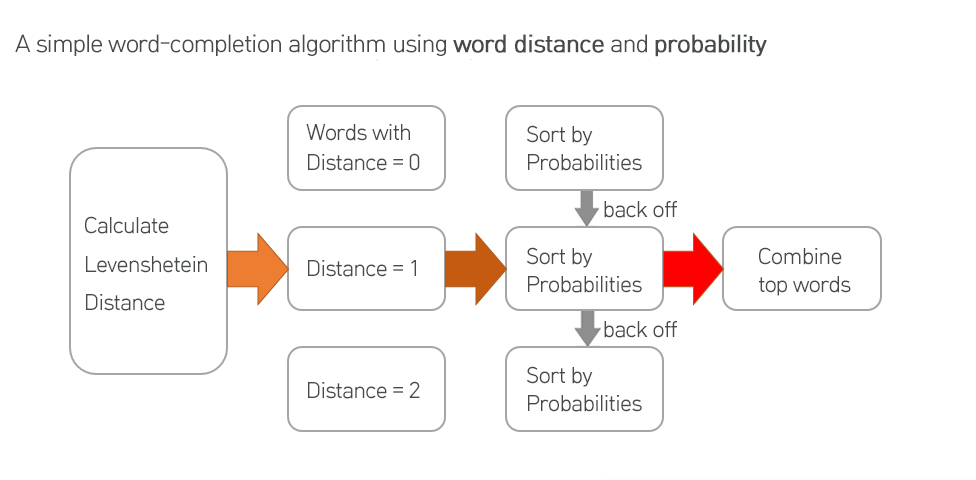
<style>
.page{position:relative;width:976px;height:480px;background:#ffffff}
.page>*{position:absolute;margin:0}
.t1{font:24px "HCRDotum";letter-spacing:-0.05em;color:#474a4a}
.t2{font:24px "HCRDotum";letter-spacing:-0.05em;color:#474a4a;font-weight:bold}
.t3{font:22px/30px "HCRDotum";letter-spacing:-0.05em;color:#474a4a}
.t4{font:22px/28px "HCRDotum";letter-spacing:-0.05em;color:#474a4a}
.t5{font:22px "HCRDotum";letter-spacing:-0.05em;color:#474a4a}
</style>
<div class="page">
<p class="t1" style="left:15px;top:34px;width:752px;height:23px">A simple word-completion algorithm using <span class="t2">word distance</span> and <span class="t2">probability</span></p>
<p class="t3" style="left:306px;top:124px;width:114px;height:47px">Words with<br>Distance = 0</p>
<p class="t4" style="left:526px;top:125px;width:116px;height:46px">Sort by <br>Probabilities</p>
<p class="t5" style="left:604px;top:201px;width:73px;height:17px">back off</p>
<p class="t5" style="left:85px;top:216px;width:122px;height:95px">Calculate<br>Levenshetein<br>Distance</p>
<p class="t4" style="left:526px;top:247px;width:116px;height:46px">Sort by <br>Probabilities</p>
<p class="t4" style="left:759px;top:247px;width:92px;height:49px">Combine<br>top words</p>
<p class="t5" style="left:308px;top:260px;width:108px;height:17px">Distance = 1</p>
<p class="t5" style="left:604px;top:321px;width:73px;height:17px">back off</p>
<p class="t4" style="left:526px;top:366px;width:116px;height:46px">Sort by <br>Probabilities</p>
<p class="t5" style="left:308px;top:381px;width:112px;height:18px">Distance = 2</p>
</div>
